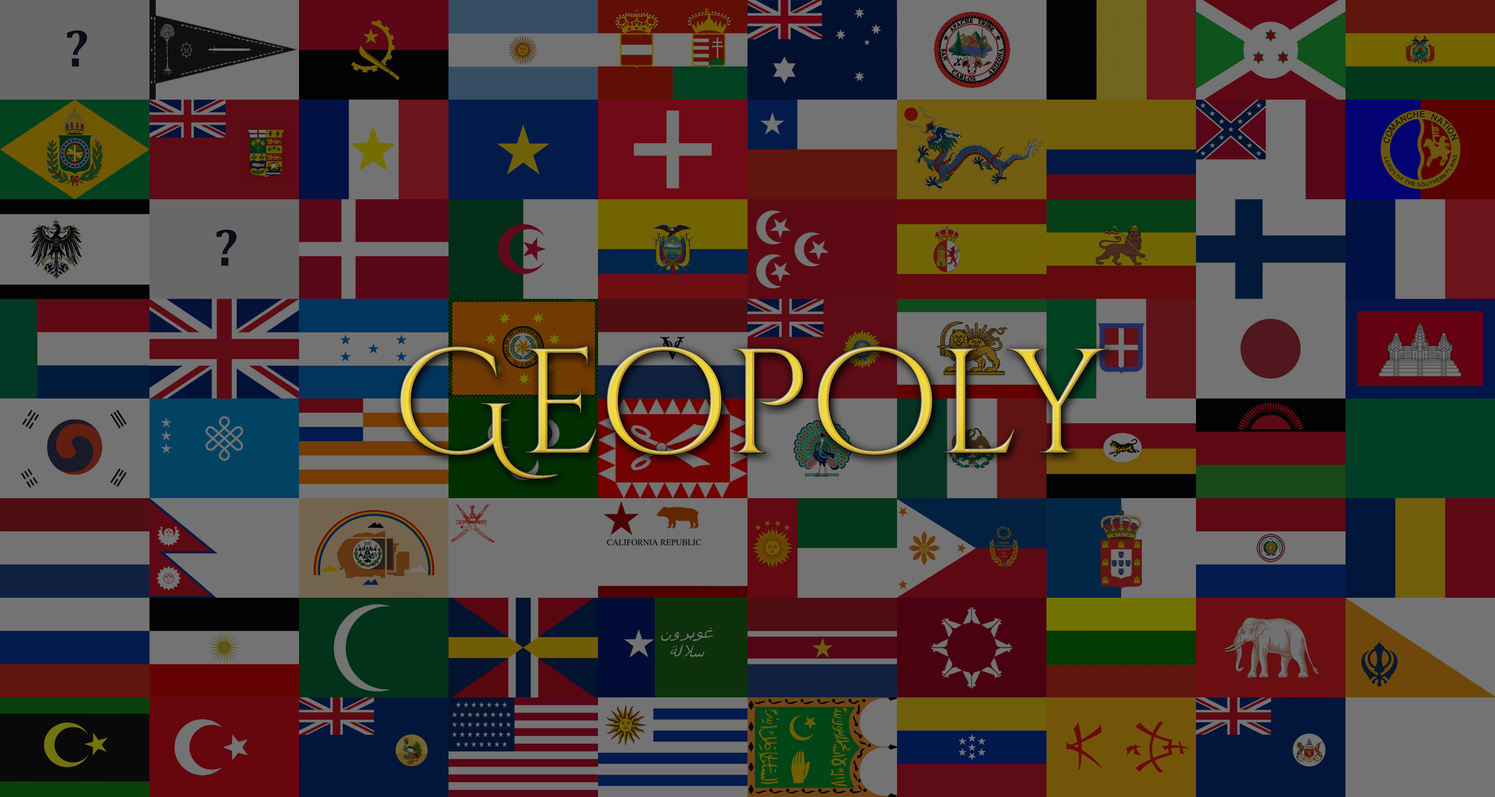
<style>
.page{position:relative;width:1495px;height:797px}
.page>*{position:absolute;margin:0}
.t1{font:149.5px "CinzelDecorative-Regular"}
</style>
<div class="page">
<p class="t1" style="left:400px;top:346px;width:709px;height:134px">Geopoly</p>
</div>
